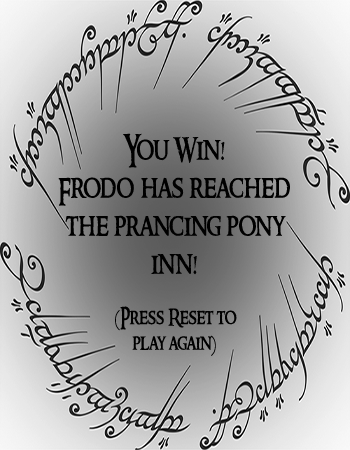
<style>
.page{position:relative;width:350px;height:450px}
.page>*{position:absolute;margin:0}
.t1{font:31.7px "RingbearerMedium";color:#000000;scale:0.79 1}
.t2{font:21.3px "RingbearerMedium";color:#000000;scale:0.79 1}
</style>
<div class="page">
<p class="t1" style="left:58px;top:133px;width:232px;height:142px;text-align:center">You Win!<br>Frodo has reached<br>the prancing pony<br>inn!</p>
<p class="t2" style="left:115px;top:306px;width:122px;height:50px;text-align:center">(Press Reset to<br>play again)</p>
</div>
